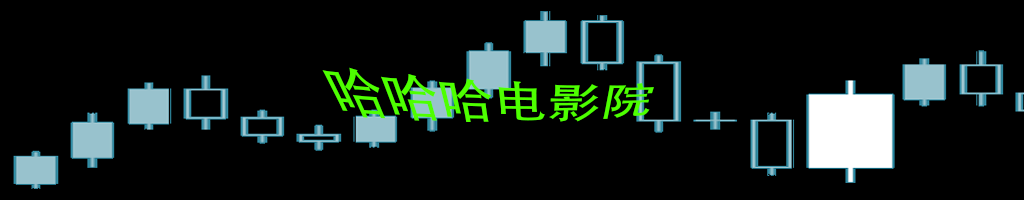
<style>
.page{position:relative;width:1024px;height:200px;background:#000000}
.page>*{position:absolute;margin:0}
.t1{font:12px "AdobeHeitiStd-Regular";color:#4eff00}
</style>
<div class="page">
<p class="t1" style="left:322px;top:67px;width:332px;height:55px;text-align:center">哈哈哈电影院</p>
</div>
